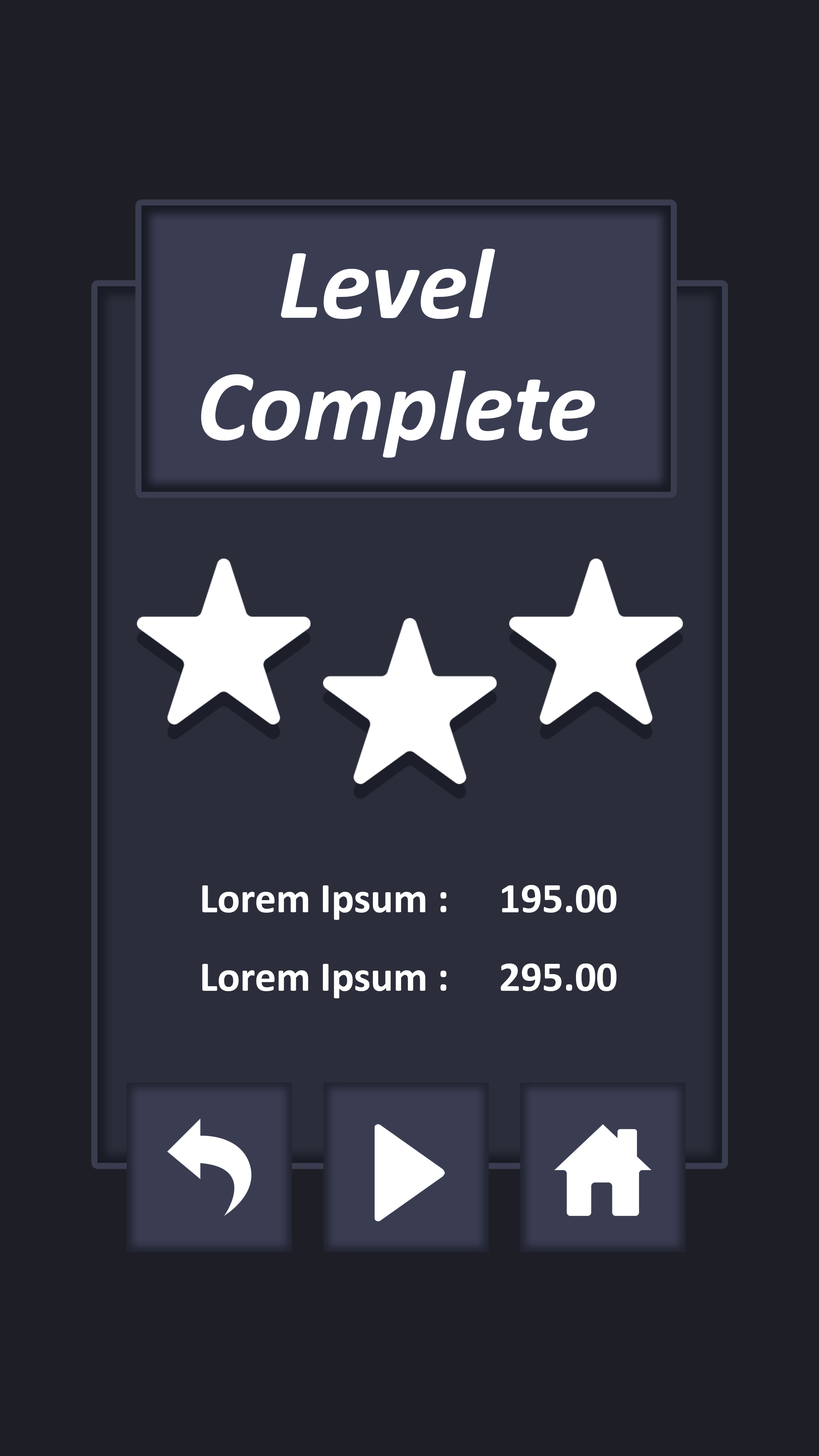
<style>
.page{position:relative;width:819px;height:1456px;background:#1e1f26}
.page>*{position:absolute;margin:0}
.t1{font:101.7px "Calibri-BoldItalic";color:#ffffff}
.t2{font:42.3px "Calibri-Bold";color:#ffffff}
</style>
<div class="page">
<p class="t1" style="left:201px;top:249px;width:394px;height:209px;text-align:center">Level <br>Complete</p>
<p class="t2" style="left:202px;top:885px;width:245px;height:35px">Lorem Ipsum :</p>
<p class="t2" style="left:502px;top:885px;width:115px;height:28px">195.00</p>
<p class="t2" style="left:202px;top:964px;width:245px;height:34px">Lorem Ipsum :</p>
<p class="t2" style="left:500px;top:963px;width:117px;height:28px">295.00</p>
</div>
